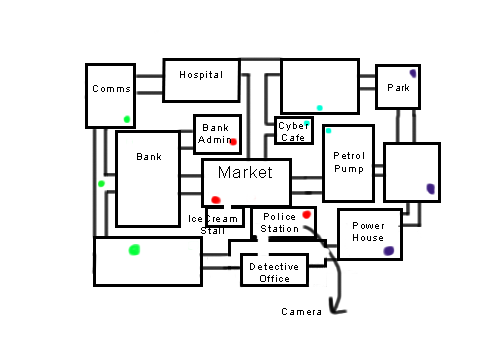
<style>
.page{position:relative;width:504px;height:360px;background:#ffffff}
.page>*{position:absolute;margin:0}
.t1{font:10px "ArialMT";letter-spacing:0.075em;color:#000000}
.t2{font:16px "ArialMT";letter-spacing:0.075em;color:#000000}
</style>
<div class="page">
<p class="t1" style="left:180px;top:71px;width:42px;height:9px">Hospital</p>
<p class="t1" style="left:93px;top:85px;width:37px;height:7px">Comms</p>
<p class="t1" style="left:388px;top:84px;width:21px;height:7px">Park</p>
<p class="t1" style="left:198px;top:124px;width:33px;height:19px;text-align:center">Bank<br>Admin</p>
<p class="t1" style="left:279px;top:122px;width:29px;height:19px;text-align:center">Cyber<br>Cafe</p>
<p class="t1" style="left:137px;top:153px;width:24px;height:7px">Bank</p>
<p class="t1" style="left:334px;top:152px;width:30px;height:22px;text-align:center">Petrol<br>Pump</p>
<p class="t2" style="left:219px;top:166px;width:53px;height:12px">Market</p>
<p class="t1" style="left:189px;top:215px;width:48px;height:19px;text-align:center">IceCream <br>Stall</p>
<p class="t1" style="left:261px;top:213px;width:37px;height:19px;text-align:center">Police Station</p>
<p class="t1" style="left:353px;top:222px;width:31px;height:19px;text-align:center">Power<br>House</p>
<p class="t1" style="left:250px;top:263px;width:48px;height:19px;text-align:center">Detective Office</p>
<p class="t1" style="left:282px;top:308px;width:39px;height:7px">Camera</p>
</div>
